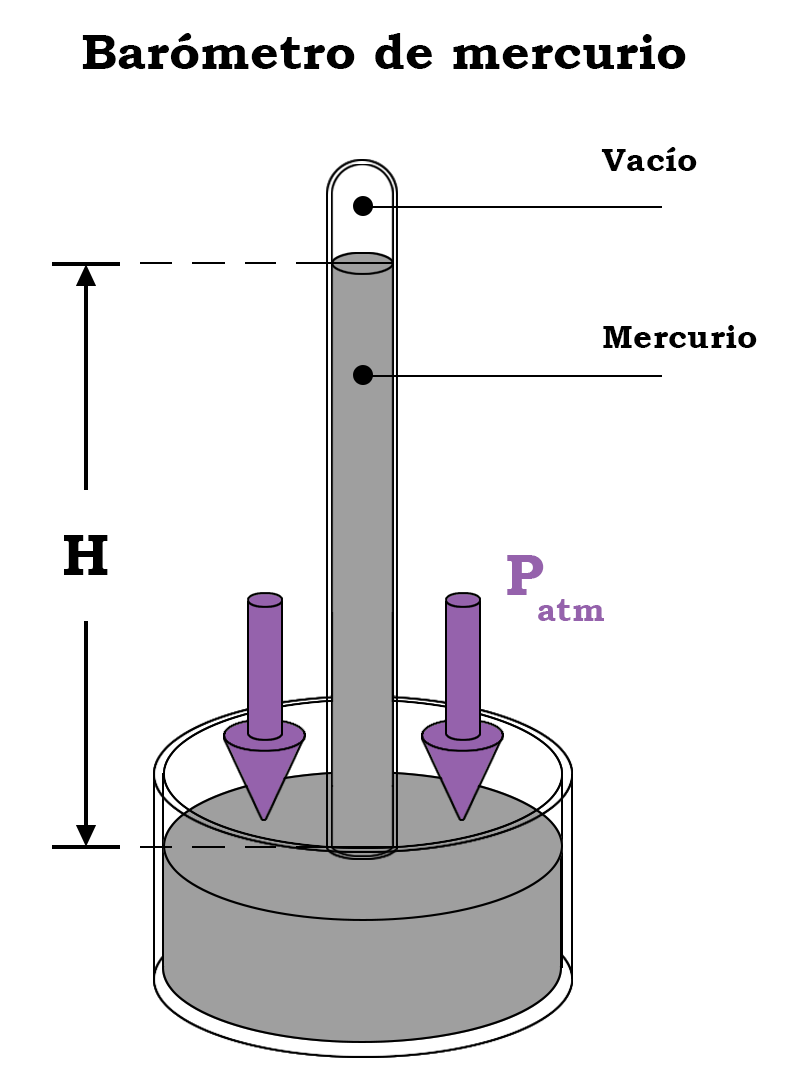
<style>
.page{position:relative;width:795px;height:1080px;background:#ffffff}
.page>*{position:absolute;margin:0}
.t1{font:50px "BookmanOldStyle-Bold";color:#000000}
.t2{font:33.3px "BookmanOldStyle-Bold";color:#000000}
.t3{font:58.3px "BookmanOldStyle-Bold";color:#000000}
.t4{font:58.3px "BookmanOldStyle-Bold";color:#9562ac}
.t5{font:33.3px "BookmanOldStyle-Bold";color:#9562ac}
</style>
<div class="page">
<p class="t1" style="left:82px;top:33px;width:604px;height:36px">Barómetro de mercurio</p>
<p class="t2" style="left:601px;top:147px;width:96px;height:24px">Vacío</p>
<p class="t2" style="left:603px;top:325px;width:154px;height:23px">Mercurio</p>
<p class="t3" style="left:64px;top:535px;width:44px;height:40px">H</p>
<p class="t4" style="left:507px;top:555px;width:37px;height:40px">P</p>
<p class="t5" style="left:538px;top:599px;width:66px;height:22px">atm</p>
</div>
